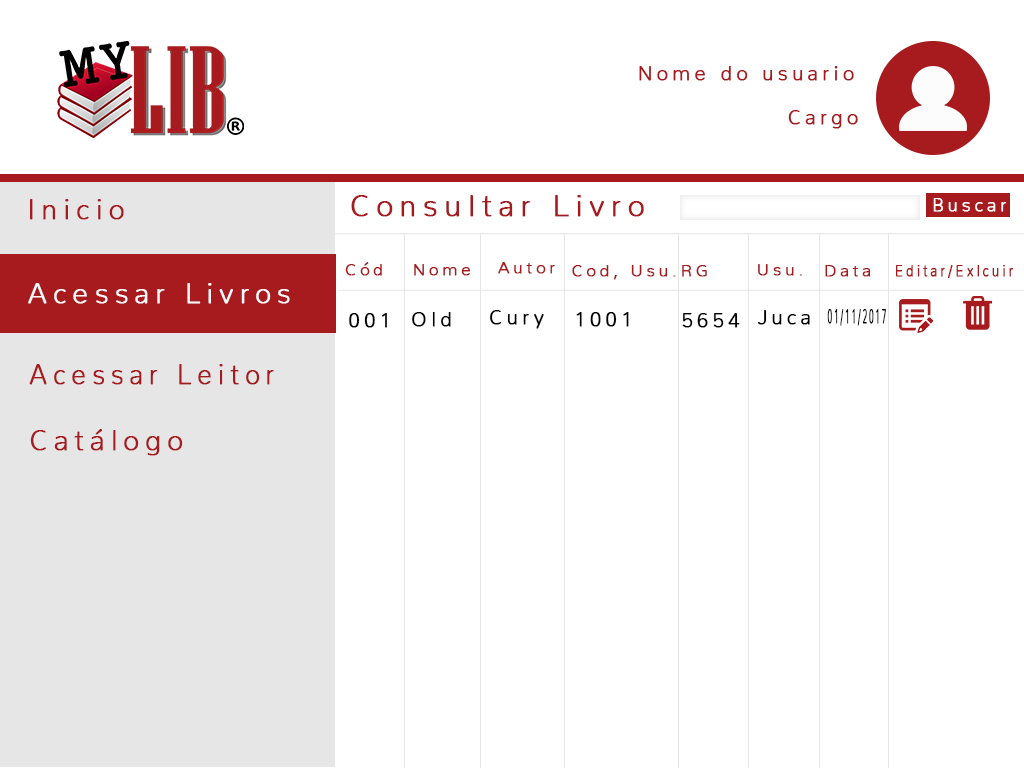
<style>
.page{position:relative;width:1024px;height:768px;background:#ffffff}
.page>*{position:absolute;margin:0}
.t1{font:20px "Nunito-ExtraLight";letter-spacing:0.2em;color:#a71b1e;font-weight:bold}
.t2{font:30px "Nunito-ExtraLight";letter-spacing:0.2em;color:#a71b1e;font-weight:bold}
.t3{font:18.1px "Nunito-ExtraLight";letter-spacing:0.2em;color:#fdfdfd;font-weight:bold}
.t4{font:28px "Nunito-ExtraLight";letter-spacing:0.2em;color:#a71b1e;font-weight:bold}
.t5{font:16.3px "Nunito-ExtraLight";letter-spacing:0.2em;color:#a71b1e;font-weight:bold;scale:1.04 1}
.t6{font:16.3px "Nunito-ExtraLight";letter-spacing:0.2em;color:#a71b1e;font-weight:bold;scale:0.82 1}
.t7{font:28px "Nunito-ExtraLight";letter-spacing:0.2em;color:#fbf9f9;font-weight:bold}
.t8{font:20px "Nunito-ExtraLight";letter-spacing:0.2em;color:#010101;font-weight:bold}
.t9{font:20px "Nunito-ExtraLight";letter-spacing:0.2em;color:#010101;font-weight:bold;scale:0.41 1}
.t10{font:28px "Nunito-ExtraLight";letter-spacing:0.2em;color:#a71b1e;font-weight:bold;scale:0.94 1}
</style>
<div class="page">
<p class="t1" style="left:639px;top:66px;width:215px;height:15px">Nome do usuario</p>
<p class="t1" style="left:788px;top:110px;width:70px;height:19px">Cargo</p>
<p class="t2" style="left:351px;top:195px;width:293px;height:22px">Consultar Livro</p>
<p class="t3" style="left:933px;top:198px;width:74px;height:14px">Buscar</p>
<p class="t4" style="left:30px;top:199px;width:94px;height:21px">Inicio</p>
<p class="t5" style="left:345px;top:262px;width:37px;height:14px">Cód</p>
<p class="t5" style="left:414px;top:264px;width:56px;height:12px">Nome</p>
<p class="t5" style="left:498px;top:262px;width:57px;height:12px">Autor</p>
<p class="t5" style="left:572px;top:265px;width:104px;height:15px">Cod, Usu.</p>
<p class="t5" style="left:682px;top:265px;width:25px;height:12px">RG</p>
<p class="t5" style="left:758px;top:264px;width:44px;height:12px">Usu.</p>
<p class="t5" style="left:825px;top:265px;width:46px;height:12px">Data</p>
<p class="t6" style="left:896px;top:265px;width:117px;height:13px">Editar/Exlcuir</p>
<p class="t7" style="left:28px;top:283px;width:262px;height:21px">Acessar Livros</p>
<p class="t8" style="left:349px;top:313px;width:38px;height:15px">001</p>
<p class="t8" style="left:412px;top:312px;width:39px;height:15px">Old</p>
<p class="t8" style="left:490px;top:310px;width:54px;height:19px">Cury</p>
<p class="t8" style="left:576px;top:312px;width:53px;height:15px">1001</p>
<p class="t8" style="left:682px;top:313px;width:58px;height:15px">5654</p>
<p class="t8" style="left:758px;top:310px;width:52px;height:15px">Juca</p>
<p class="t9" style="left:827px;top:309px;width:59px;height:17px">01/11/2017</p>
<p class="t10" style="left:29px;top:364px;width:245px;height:21px">Acessar Leitor</p>
<p class="t4" style="left:30px;top:429px;width:153px;height:27px">Catálogo</p>
</div>
